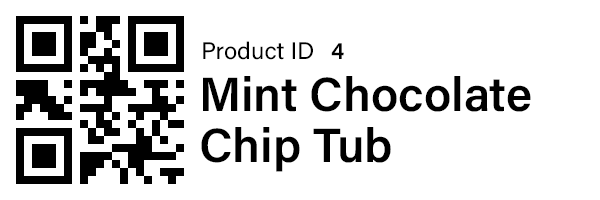
<style>
.page{position:relative;width:600px;height:200px;background:#ffffff}
.page>*{position:absolute;margin:0}
.t1{font:24px "AcuminConcept-Regular";color:#000000}
.t2{font:24px "AcuminConcept-Semibold";color:#000000}
.t3{font:48px/48px "AcuminConcept-Semibold";color:#000000}
</style>
<div class="page">
<p class="t1" style="left:203px;top:41px;width:110px;height:19px">Product ID</p>
<p class="t2" style="left:331px;top:43px;width:13px;height:16px">4</p>
<p class="t3" style="left:201px;top:76px;width:330px;height:96px">Mint Chocolate <br>Chip Tub</p>
</div>
